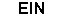
<style>
.page{position:relative;width:64px;height:16px;background:#ffffff}
.page>*{position:absolute;margin:0}
.t1{font:17.3px "ArialRoundedMTBold";letter-spacing:-0.025em;color:#000000}
</style>
<div class="page">
<p class="t1" style="left:19px;top:2px;width:25px;height:12px">EIN</p>
</div>
